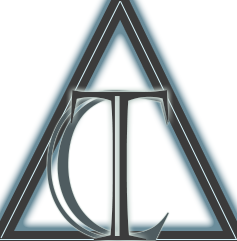
<style>
.page{position:relative;width:237px;height:241px;background:#ffffff}
.page>*{position:absolute;margin:0}
.t1{font:206.6px "Castellar";color:#4f5c60;scale:0.87 1}
.t2{font:206.6px "Castellar";color:#3d3d3d;scale:0.69 1}
</style>
<div class="page">
<p class="t1" style="left:47px;top:90px;width:122px;height:151px">C</p>
<p class="t2" style="left:70px;top:90px;width:99px;height:150px">T</p>
</div>
